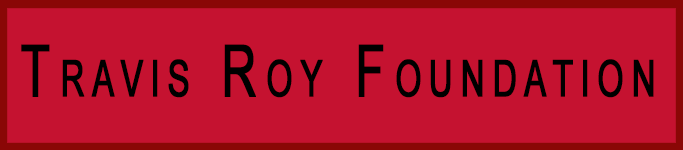
<style>
.page{position:relative;width:683px;height:150px;background:#c51230}
.page>*{position:absolute;margin:0}
.t1{font:72px "ArialMT";letter-spacing:0.2em;color:#000000;font-variant:small-caps;font-weight:bold;scale:0.67 1}
</style>
<div class="page">
<p class="t1" style="left:21px;top:44px;width:633px;height:54px">Travis Roy Foundation</p>
</div>
